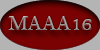
<style>
.page{position:relative;width:100px;height:50px}
.page>*{position:absolute;margin:0}
.t1{font:20.9px "BellMT";color:#9d9999}
</style>
<div class="page">
<p class="t1" style="left:8px;top:16px;width:84px;height:14px">MAAA16</p>
</div>
